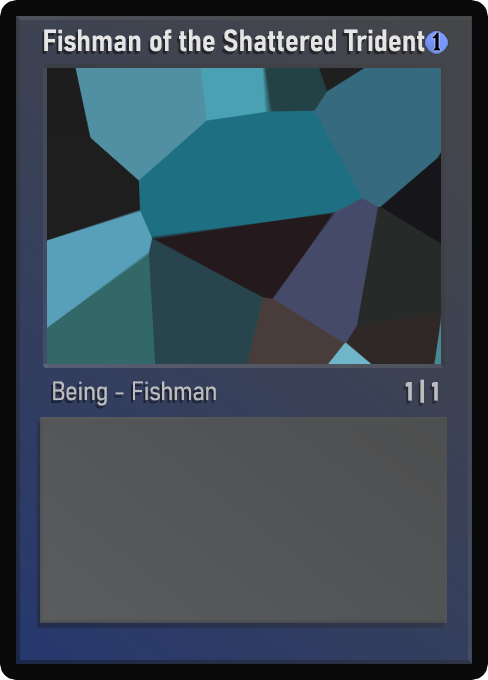
<style>
.page{position:relative;width:488px;height:680px}
.page>*{position:absolute;margin:0}
.t1{font:30px "Bahnschrift-SemiBoldSemiCondensed";color:#f2f2f2;font-weight:bold}
.t2{font:25px "WTRRoycroft";color:#000000;font-weight:bold;scale:1.09 1}
.t3{font:26px "Bahnschrift-LightSemiCondensed";color:#c8c8c8;font-weight:bold}
.t4{font:26px "Bahnschrift-BoldSemiCondensed";color:#bcbdc0;font-weight:bold}
</style>
<div class="page">
<p class="t1" style="left:44px;top:29px;width:381px;height:23px;opacity:0.9">Fishman of the Shattered Trident</p>
<p class="t2" style="left:432px;top:32px;width:9px;height:19px">1</p>
<p class="t3" style="left:53px;top:381px;width:163px;height:25px;opacity:0.9">Being - Fishman</p>
<p class="t4" style="left:405px;top:379px;width:33px;height:24px">1 | 1</p>
</div>
